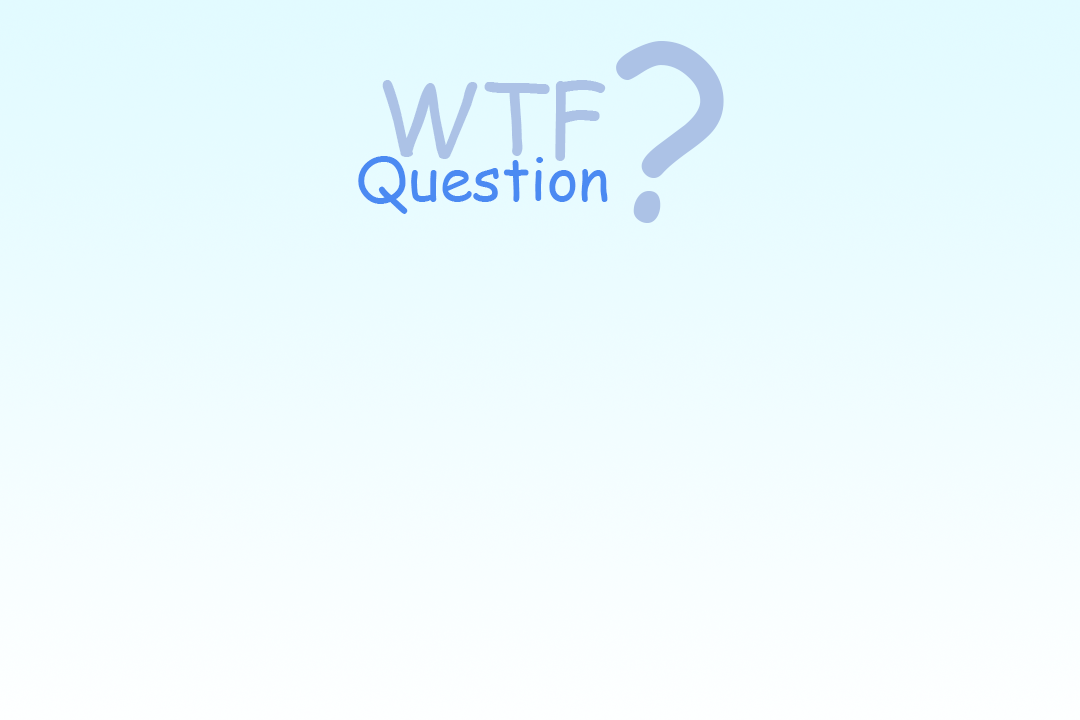
<style>
.page{position:relative;width:1080px;height:720px}
.page>*{position:absolute;margin:0}
.t1{font:240.9px "ComicSansMS";color:#acc2e6}
.t2{font:100px "ComicSansMS";color:#acc2e6}
.t3{font:60px "ComicSansMS";color:#4b8af2}
</style>
<div class="page">
<p class="t1" style="left:616px;top:40px;width:108px;height:183px">?</p>
<p class="t2" style="left:382px;top:80px;width:224px;height:81px">WTF</p>
<p class="t3" style="left:358px;top:156px;width:250px;height:58px">Question</p>
</div>
